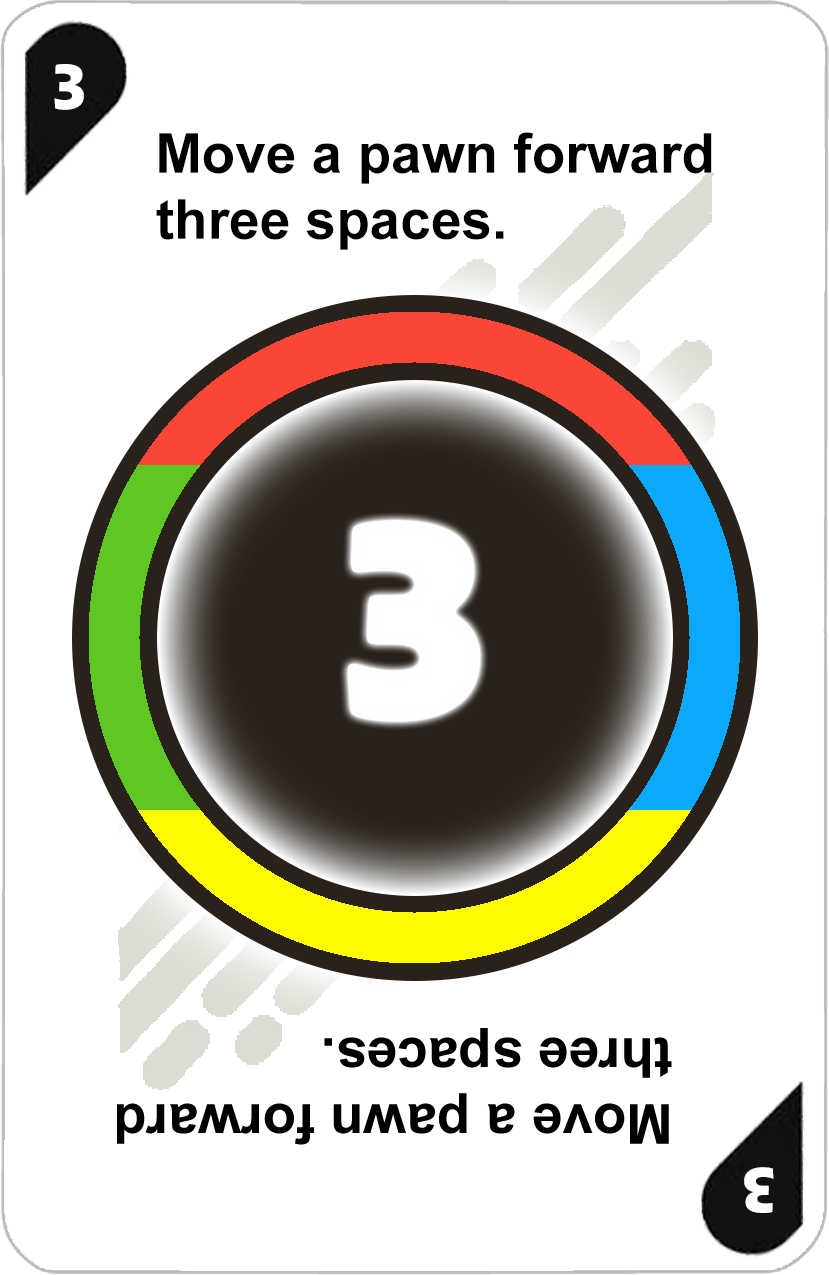
<style>
.page{position:relative;width:829px;height:1275px;background:#ffffff}
.page>*{position:absolute;margin:0}
.t1{font:72px "AdGothic-Regular";color:#ffffff}
.t2{font:55px "Arial-BoldMT";color:#000000}
.t3{font:300px "AdGothic-Regular";color:#ffffff}
</style>
<div class="page">
<p class="t1" style="left:54px;top:64px;width:30px;height:46px">3</p>
<p class="t2" style="left:156px;top:132px;width:556px;height:118px">Move a pawn forward <br>three spaces.</p>
<p class="t3" style="left:352px;top:525px;width:123px;height:192px">3</p>
</div>
